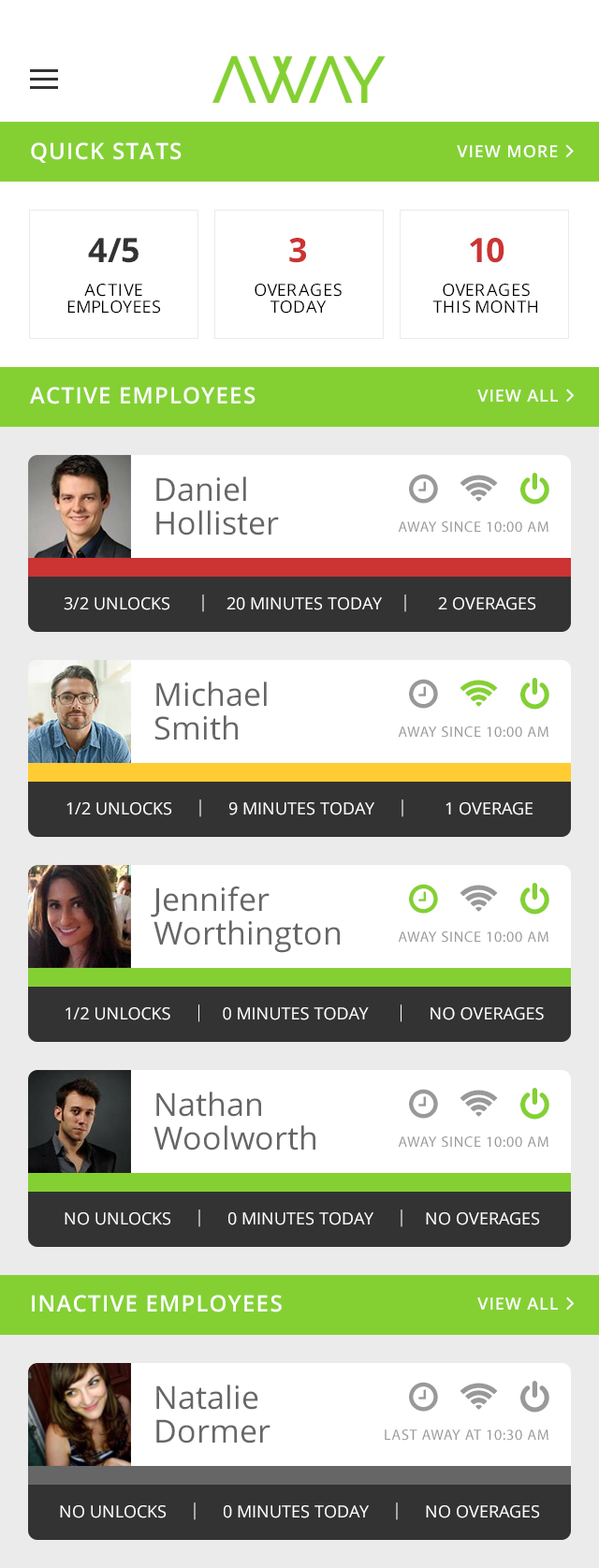
<style>
.page{position:relative;width:599px;height:1568px;background:#ffffff}
.page>*{position:absolute;margin:0}
.t1{font:22.5px "OpenSans-Semibold";letter-spacing:0.05em;color:#ffffff;text-transform:uppercase}
.t2{font:16.9px/16.9px "OpenSans";color:#000000;text-transform:uppercase}
.t3{font:33.7px/22.5px "OpenSans-Bold";color:#333333}
.t4{font:33.7px/22.5px "OpenSans-Bold";color:#cc3333}
.t5{font:31.8px/33.7px "OpenSans";color:#666666}
.t6{font:16.9px "OpenSans";color:#ffffff}
</style>
<div class="page">
<p class="t1" style="left:31px;top:142px;width:151px;height:21px">QUICK STATS</p>
<p class="t2" style="left:67px;top:238px;width:94px;height:76px;text-align:center"><span class="t3">4/5<br></span><br>ACTIVE<br>EMPLOYEES</p>
<p class="t2" style="left:255px;top:238px;width:87px;height:76px;text-align:center"><span class="t4">3<br></span><br>OVERAGES<br>TODAY</p>
<p class="t2" style="left:432px;top:238px;width:105px;height:76px;text-align:center"><span class="t4">10<br></span><br>OVERAGES<br>THIS MONTH</p>
<p class="t1" style="left:30px;top:387px;width:226px;height:17px">ACTIVE EMPLOYEES</p>
<p class="t5" style="left:156px;top:476px;width:123px;height:59px">Daniel<br>Hollister</p>
<p class="t6" style="left:64px;top:594px;width:472px;height:18px">3/2 UNLOCKS      |    20 MINUTES TODAY    |      2 OVERAGES</p>
<p class="t5" style="left:154px;top:681px;width:113px;height:59px">Michael<br>Smith</p>
<p class="t6" style="left:66px;top:799px;width:467px;height:18px">1/2 UNLOCKS     |     9 MINUTES TODAY     |        1 OVERAGE</p>
<p class="t5" style="left:151px;top:887px;width:189px;height:66px">Jennifer<br>Worthington</p>
<p class="t6" style="left:66px;top:1004px;width:478px;height:18px">1/2 UNLOCKS     |    0 MINUTES TODAY      |     NO OVERAGES</p>
<p class="t5" style="left:154px;top:1092px;width:161px;height:58px">Nathan<br>Woolworth</p>
<p class="t6" style="left:65px;top:1209px;width:475px;height:18px">NO UNLOCKS     |     0 MINUTES TODAY     |    NO OVERAGES</p>
<p class="t1" style="left:32px;top:1295px;width:250px;height:17px">INACTIVE EMPLOYEES</p>
<p class="t5" style="left:156px;top:1385px;width:115px;height:58px">Natalie<br>Dormer</p>
<p class="t6" style="left:60px;top:1502px;width:480px;height:18px">NO UNLOCKS     |     0 MINUTES TODAY     |     NO OVERAGES</p>
</div>
